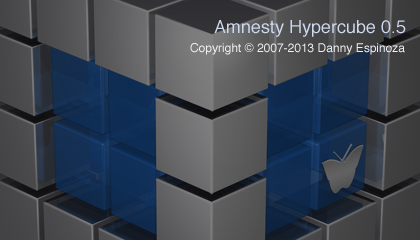
<style>
.page{position:relative;width:420px;height:240px}
.page>*{position:absolute;margin:0}
.t1{font:18px "Helvetica";color:#ccd9ef}
.t2{font:12px "Helvetica";color:#efefef}
</style>
<div class="page">
<p class="t1" style="left:214px;top:20px;width:192px;height:17px">Amnesty Hypercube 0.5</p>
<p class="t2" style="left:190px;top:43px;width:215px;height:12px">Copyright © 2007-2013 Danny Espinoza</p>
</div>
